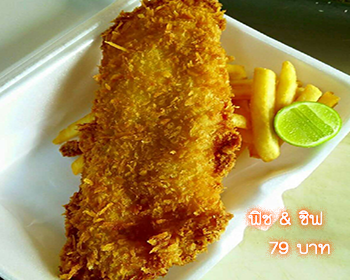
<style>
.page{position:relative;width:350px;height:280px}
.page>*{position:absolute;margin:0}
.t1{font:24px "THKodchasal";color:#ffffff}
</style>
<div class="page">
<p class="t1" style="left:248px;top:210px;width:82px;height:45px;text-align:right">ฟิช &amp; ชิฟ<br>บาท 79</p>
</div>
